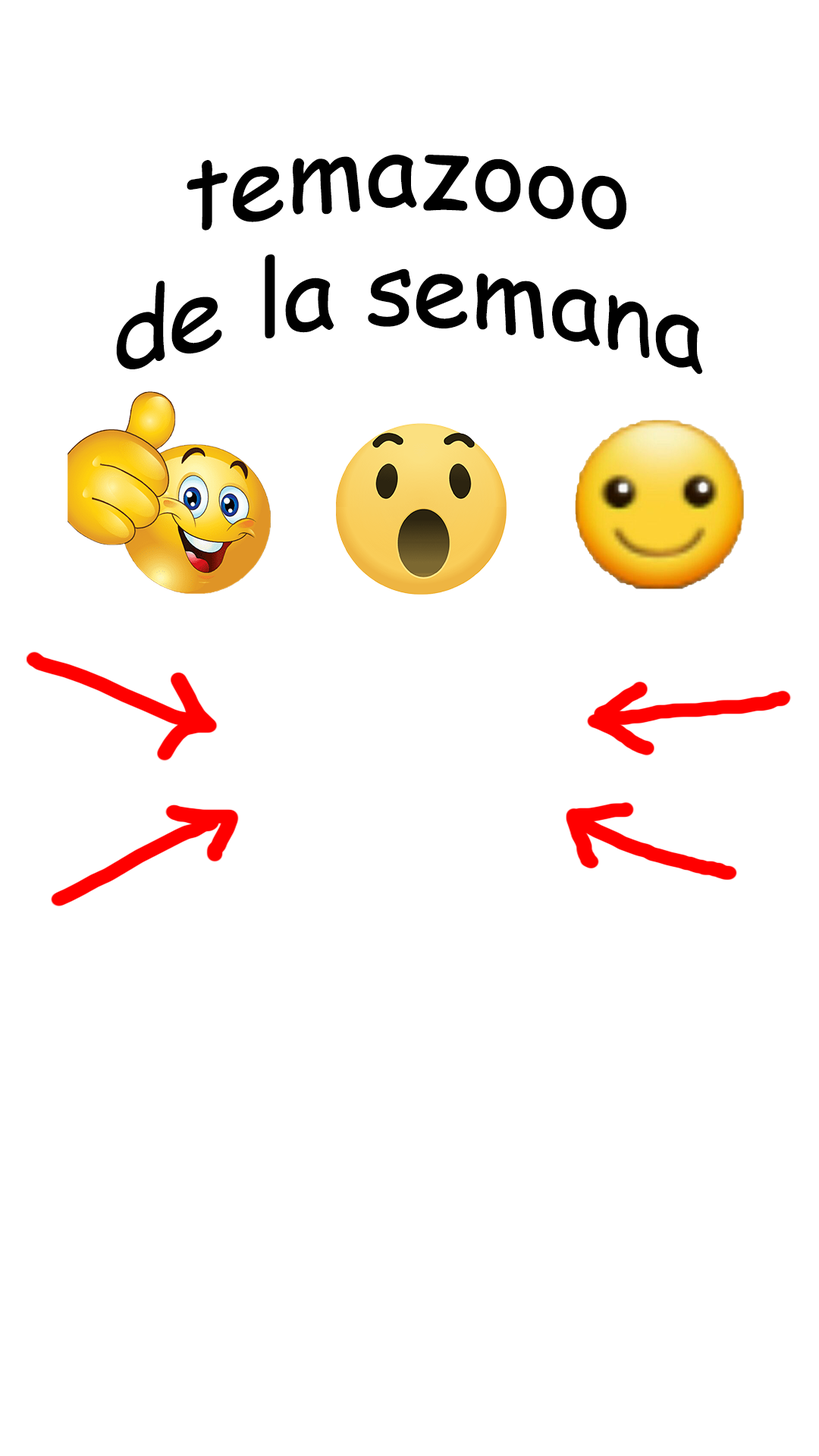
<style>
.page{position:relative;width:819px;height:1456px;background:#ffffff}
.page>*{position:absolute;margin:0}
.t1{font:100.5px "ComicSansMS";color:#000000}
</style>
<div class="page">
<p class="t1" style="left:116px;top:154px;width:587px;height:221px;text-align:center">temazooo<br>de la semana</p>
</div>
